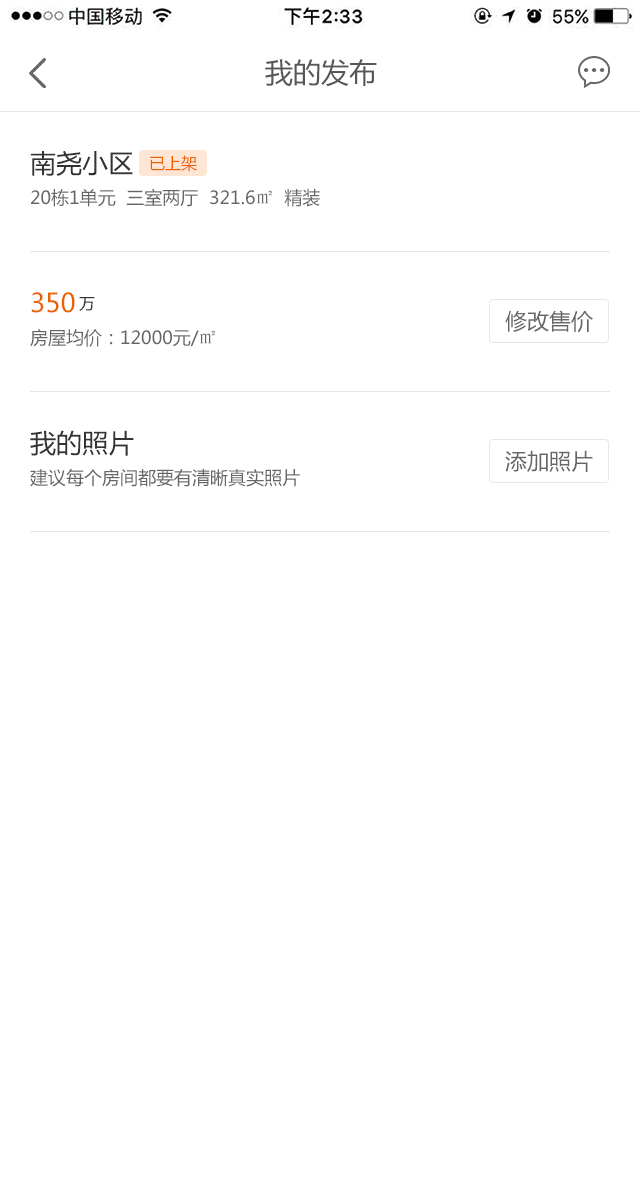
<style>
.page{position:relative;width:640px;height:1201px;background:#ffffff}
.page>*{position:absolute;margin:0}
.t1{font:28px "MicrosoftYaHei";color:#585757}
.t2{font:26px "MicrosoftYaHei";color:#333333}
.t3{font:16px "MicrosoftYaHei";color:#ec6100}
.t4{font:18px "MicrosoftYaHei";color:#666666}
.t5{font:18px "SimSun";color:#666666}
.t6{font:26px "MicrosoftYaHei";color:#ec6100}
.t7{font:16px "MicrosoftYaHei";color:#333333}
.t8{font:22px "MicrosoftYaHei";color:#666666}
</style>
<div class="page">
<p class="t1" style="left:265px;top:59px;width:112px;height:28px">我的发布</p>
<p class="t2" style="left:30px;top:150px;width:103px;height:26px">南尧小区</p>
<p class="t3" style="left:150px;top:155px;width:47px;height:17px">已上架</p>
<p class="t4" style="left:31px;top:188px;width:289px;height:19px">20栋1单元  三室两厅  321.6<span class="t5">㎡</span>  精装</p>
<p class="t6" style="left:31px;top:292px;width:44px;height:21px">350</p>
<p class="t7" style="left:79px;top:297px;width:16px;height:14px">万</p>
<p class="t8" style="left:505px;top:310px;width:88px;height:23px">修改售价</p>
<p class="t4" style="left:30px;top:329px;width:185px;height:18px">房屋均价：12000元/<span class="t5">㎡</span></p>
<p class="t2" style="left:30px;top:430px;width:104px;height:26px">我的照片</p>
<p class="t8" style="left:505px;top:450px;width:88px;height:22px">添加照片</p>
<p class="t4" style="left:30px;top:468px;width:270px;height:19px">建议每个房间都要有清晰真实照片</p>
</div>
